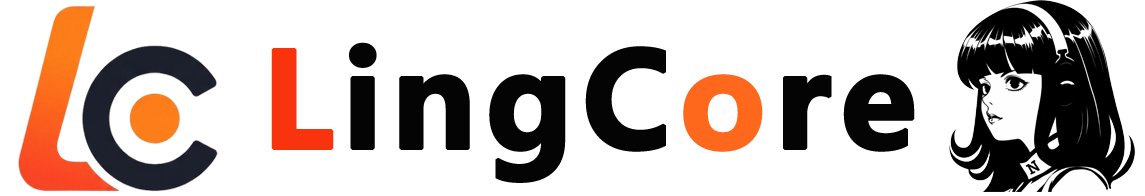
<style>
.page{position:relative;width:1145px;height:196px;background:#ffffff}
.page>*{position:absolute;margin:0}
.t1{font:130px "MicrosoftYaHei-Bold";letter-spacing:0.05em;color:#040404;font-weight:bold}
.t2{font:130px "MicrosoftYaHei-Bold";letter-spacing:0.05em;color:#f9330e;font-weight:bold}
.t3{font:130px "MicrosoftYaHei-Bold";letter-spacing:0.05em;color:#fe671c;font-weight:bold}
</style>
<div class="page">
<p class="t1" style="left:271px;top:42px;width:644px;height:141px"><span class="t2">L</span>ingC<span class="t3">o</span>re</p>
</div>
